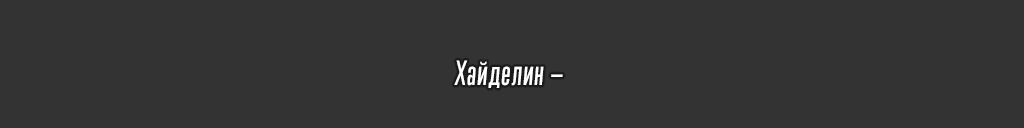
<style>
.page{position:relative;width:1024px;height:128px;background:#333333}
.page>*{position:absolute;margin:0}
.t1{font:32.1px "TrumpGothicPro-MediumIt";letter-spacing:0.035em;color:#ffffff}
</style>
<div class="page">
<p class="t1" style="left:454px;top:60px;width:109px;height:28px">Хайделин —</p>
</div>
